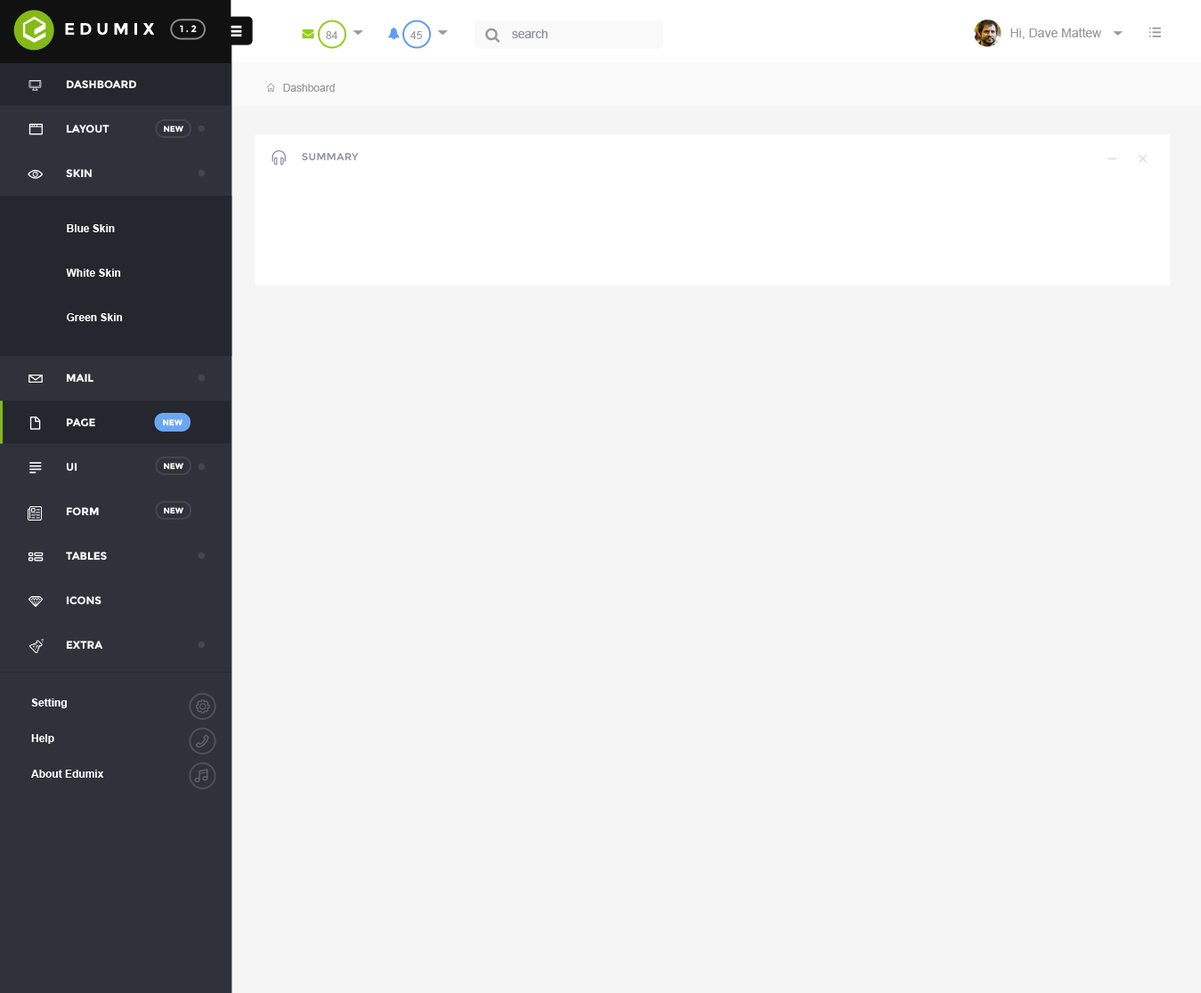
<style>
.page{position:relative;width:1201px;height:993px;background:#f5f5f5}
.page>*{position:absolute;margin:0}
.t1{font:16.7px "Montserrat-Bold";letter-spacing:0.25em;color:#ffffff}
.t2{font:9.3px "Montserrat-Bold";letter-spacing:0.25em;color:#ffffff}
.t3{font:12px "ArialMT";color:#8c92a3}
.t4{font:12.5px "ArialMT";color:#999999}
.t5{font:10.7px "ArialMT";color:#999999}
.t6{font:10.7px/44.5px "Montserrat-Bold";color:#ffffff;text-transform:uppercase}
.t7{font:8px "Montserrat-Bold";color:#ffffff}
.t8{font:9.8px "Montserrat-Regular";letter-spacing:0.05em;color:#8c92a3;text-transform:uppercase}
.t9{font:10.7px/44.5px "Arial-BoldMT";color:#ffffff}
.t10{font:10.7px/35.6px "Arial-BoldMT";color:#ffffff}
</style>
<div class="page">
<p class="t1" style="left:65px;top:23px;width:90px;height:13px">EDUMIX</p>
<p class="t2" style="left:180px;top:25px;width:17px;height:8px">1.2</p>
<p class="t3" style="left:512px;top:29px;width:35px;height:9px">search</p>
<p class="t4" style="left:1010px;top:28px;width:91px;height:11px">Hi, Dave Mattew</p>
<p class="t5" style="left:326px;top:31px;width:11px;height:8px">84</p>
<p class="t5" style="left:410px;top:31px;width:12px;height:8px">45</p>
<p class="t6" style="left:66px;top:80px;width:70px;height:98px">Dashboard<br>Layout<br>skin</p>
<p class="t5" style="left:283px;top:84px;width:52px;height:8px">Dashboard</p>
<p class="t7" style="left:164px;top:125px;width:19px;height:8px">NEW</p>
<p class="t8" style="left:302px;top:153px;width:57px;height:8px">Summary</p>
<p class="t9" style="left:66px;top:224px;width:57px;height:97px">Blue Skin<br>White Skin<br>Green Skin</p>
<p class="t6" style="left:66px;top:374px;width:41px;height:276px">Mail<br>page<br>ui<br>form<br>tables<br>icons<br>extra</p>
<p class="t7" style="left:163px;top:419px;width:19px;height:7px">NEW</p>
<p class="t7" style="left:164px;top:463px;width:19px;height:7px">NEW</p>
<p class="t7" style="left:164px;top:507px;width:19px;height:7px">NEW</p>
<p class="t10" style="left:31px;top:699px;width:73px;height:79px">Setting<br>Help<br>About Edumix</p>
</div>
